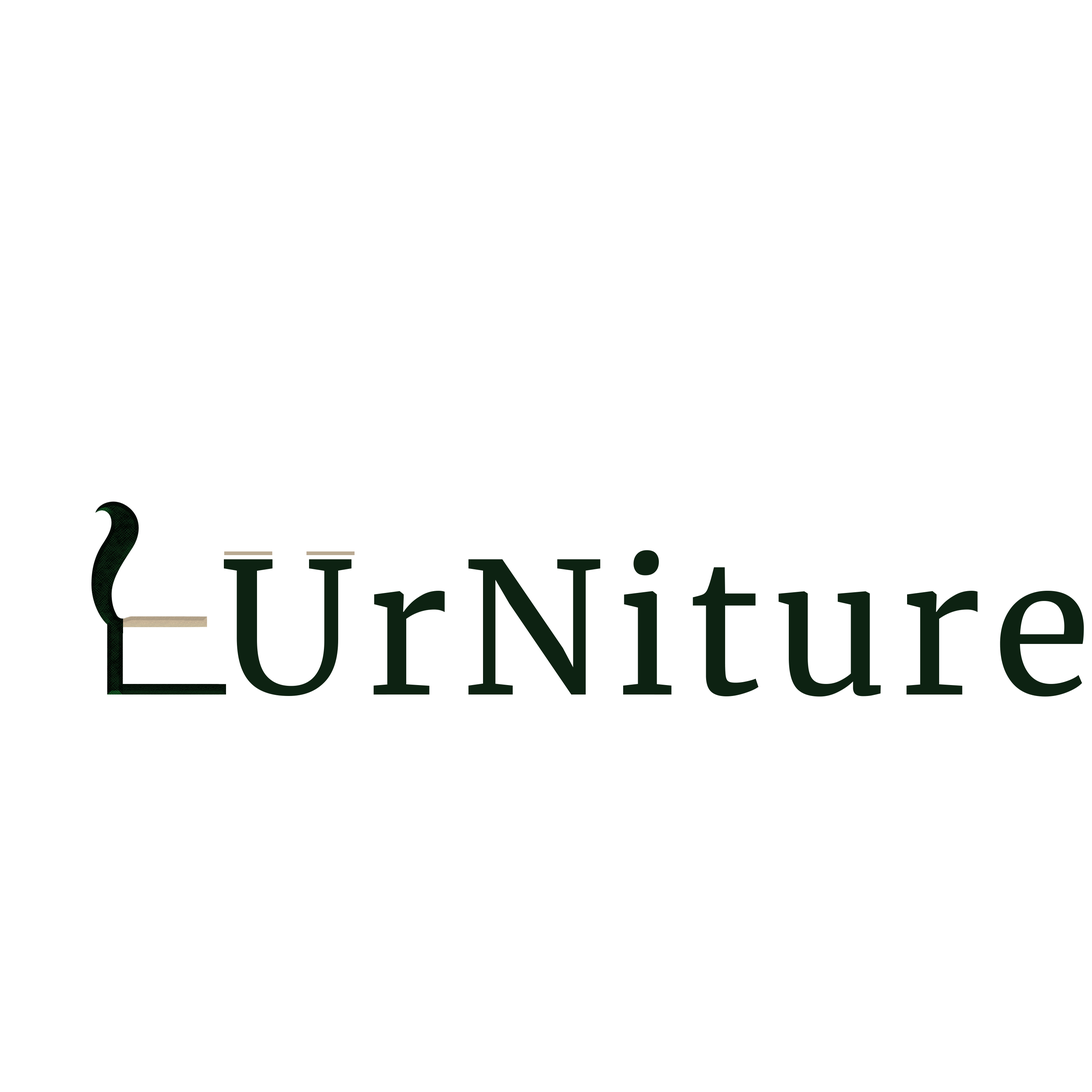
<style>
.page{position:relative;width:1092px;height:1092px;background:#ffffff}
.page>*{position:absolute;margin:0}
.t1{font:182px "Merriweather-Regular";letter-spacing:0.06em;color:#0d2212}
</style>
<div class="page">
<p class="t1" style="left:224px;top:550px;width:860px;height:147px">UrNiture</p>
</div>
